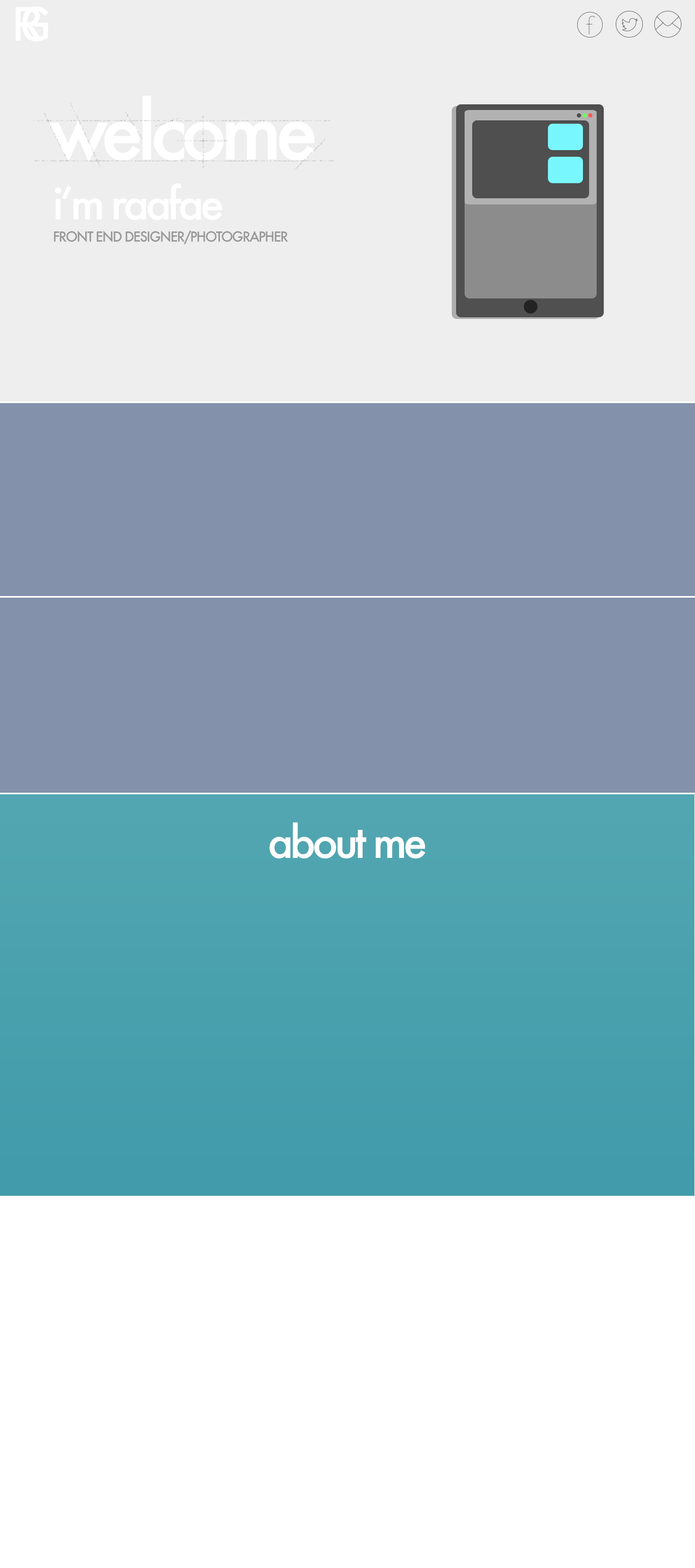
<style>
.page{position:relative;width:695px;height:1568px;background:#ffffff}
.page>*{position:absolute;margin:0}
.t1{font:64.5px "OratorStd";letter-spacing:-0.48em;color:#ffffff;scale:1.12 1}
.t2{font:77px "Futura-Medium";letter-spacing:-0.08em;color:#ffffff}
.t3{font:43px "Futura-Medium";letter-spacing:-0.08em;color:#ffffff}
.t4{font:13.6px "Futura-Medium";letter-spacing:-0.08em;color:#989898}
</style>
<div class="page">
<p class="t1" style="left:15px;top:7px;width:34px;height:35px">rg</p>
<p class="t2" style="left:49px;top:96px;width:266px;height:66px">welcome</p>
<p class="t3" style="left:55px;top:183px;width:168px;height:37px">i’m raafae</p>
<p class="t4" style="left:54px;top:230px;width:234px;height:14px">FRONT END DESIGNER/PHOTOGRAPHER</p>
<p class="t3" style="left:269px;top:822px;width:157px;height:36px">about me</p>
</div>
